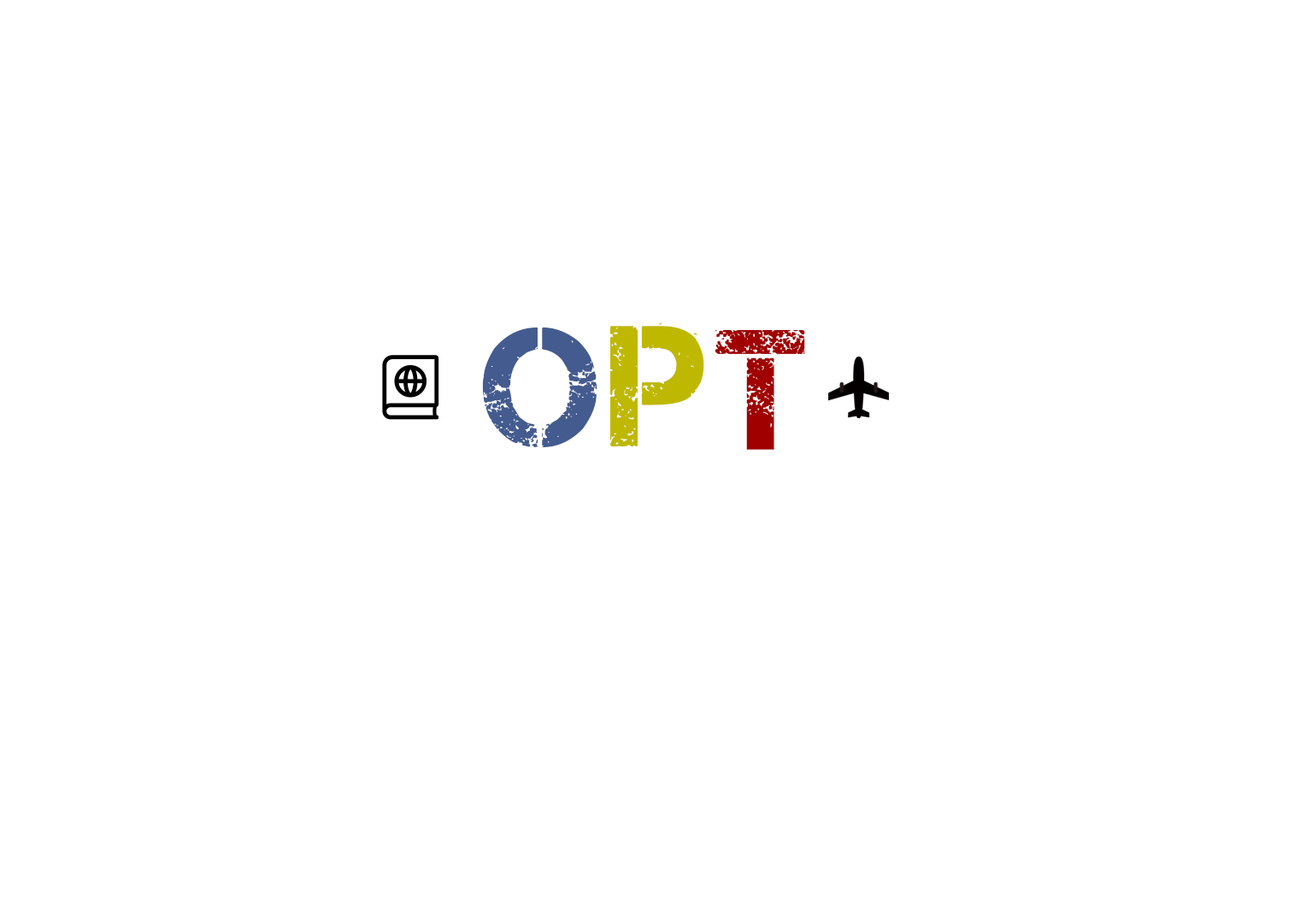
<style>
.page{position:relative;width:1312px;height:909px;background:#ffffff}
.page>*{position:absolute;margin:0}
.t1{font:171px "CaptureSmallz";letter-spacing:-0.06em;color:#445b8f}
.t2{font:171px "CaptureSmallz";letter-spacing:-0.06em;color:#bfb800}
.t3{font:171px "CaptureSmallz";letter-spacing:-0.06em;color:#a00000}
</style>
<div class="page">
<p class="t1" style="left:482px;top:327px;width:116px;height:120px">O</p>
<p class="t2" style="left:610px;top:322px;width:94px;height:124px">P</p>
<p class="t3" style="left:715px;top:329px;width:90px;height:121px">T</p>
</div>
